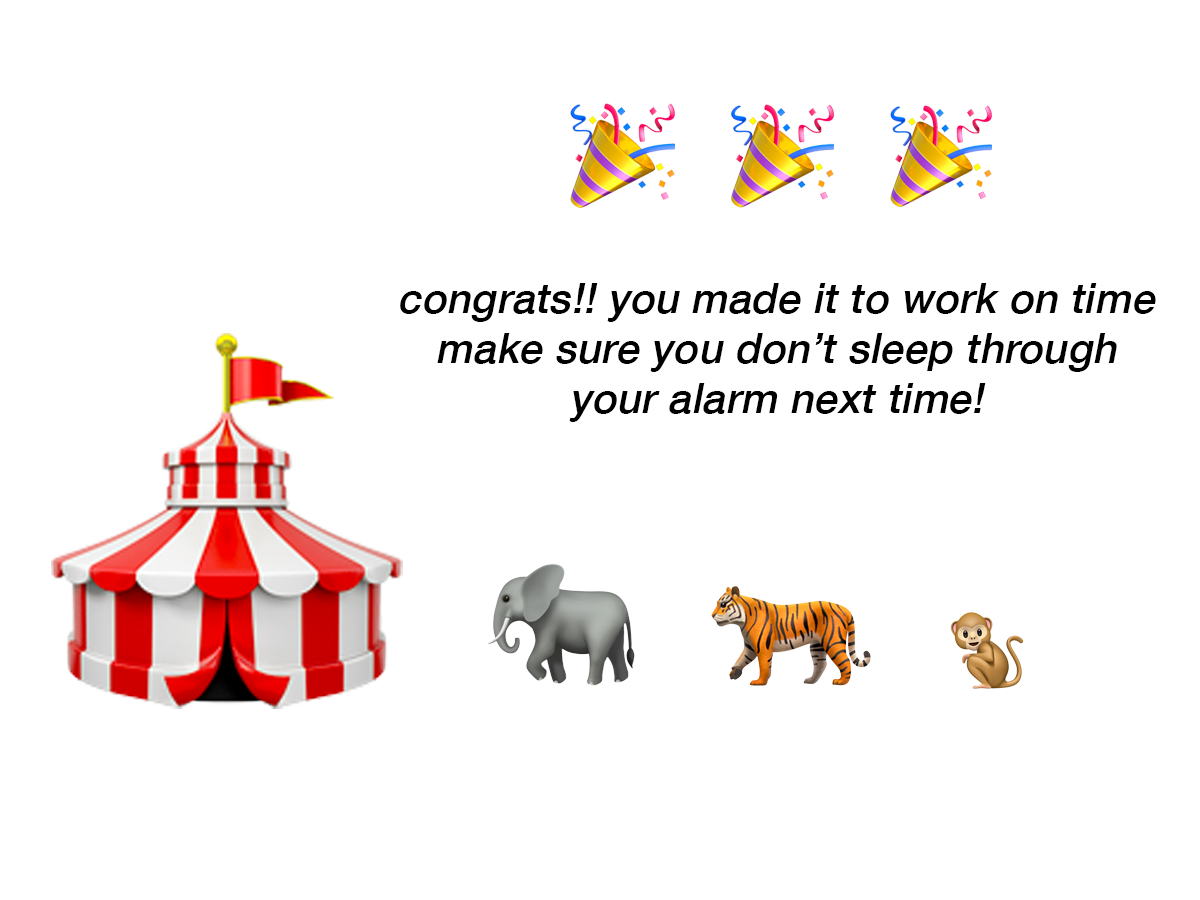
<style>
.page{position:relative;width:1200px;height:900px;background:#ffffff}
.page>*{position:absolute;margin:0}
.t1{font:41.7px "HelveticaNeue-Medium";letter-spacing:0.01em;color:#000000;font-style:italic}
</style>
<div class="page">
<p class="t1" style="left:400px;top:283px;width:756px;height:139px;text-align:center">congrats!! you made it to work on time<br>make sure you don’t sleep through<br>your alarm next time!</p>
</div>
